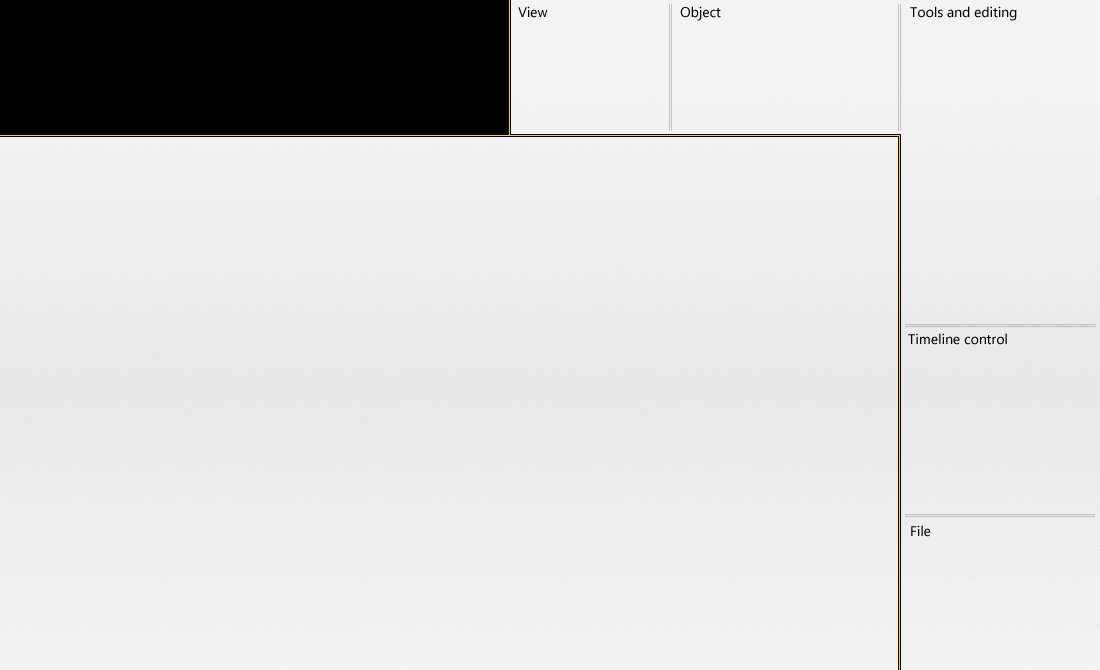
<style>
.page{position:relative;width:1100px;height:670px}
.page>*{position:absolute;margin:0}
.t1{font:14px "SegoeUI";color:#000000}
</style>
<div class="page">
<p class="t1" style="left:518px;top:6px;width:30px;height:12px">View</p>
<p class="t1" style="left:680px;top:6px;width:41px;height:15px">Object</p>
<p class="t1" style="left:910px;top:6px;width:107px;height:15px">Tools and editing</p>
<p class="t1" style="left:908px;top:333px;width:99px;height:12px">Timeline control</p>
<p class="t1" style="left:911px;top:525px;width:20px;height:12px">File</p>
</div>
